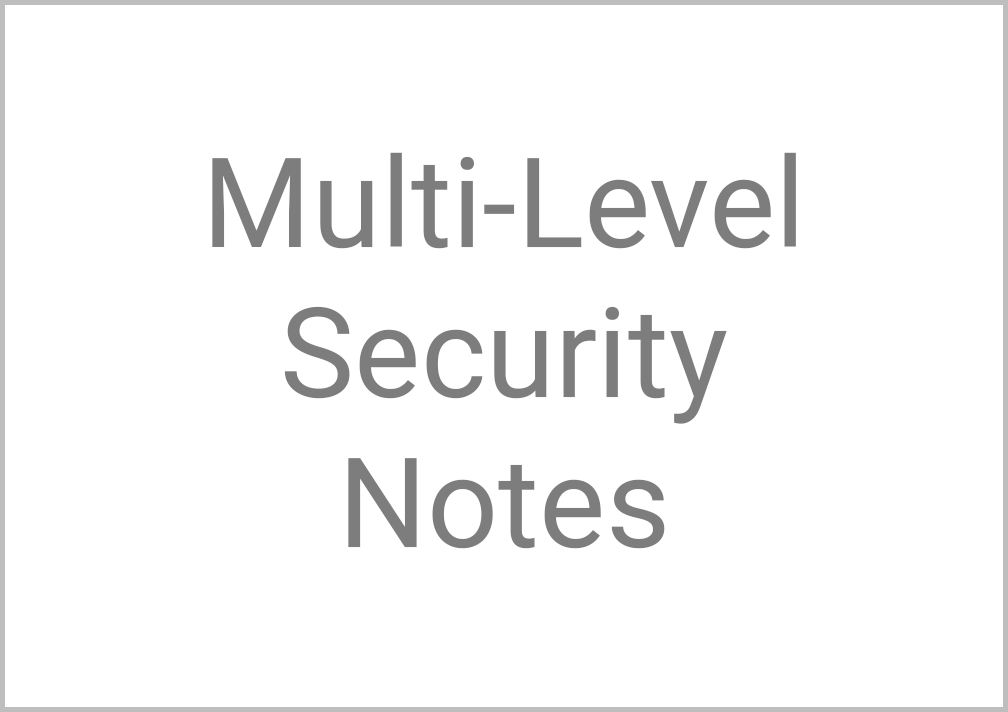
<style>
.page{position:relative;width:1008px;height:712px;background:#ffffff}
.page>*{position:absolute;margin:0}
.t1{font:125px "Roboto-Regular";color:#7d7d7d}
</style>
<div class="page">
<p class="t1" style="left:212px;top:152px;width:584px;height:397px;text-align:center">Multi-Level<br>Security<br>Notes</p>
</div>
